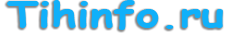
<style>
.page{position:relative;width:230px;height:39px;background:#ffffff}
.page>*{position:absolute;margin:0}
.t1{font:34px "ComicSansMS-Bold";color:#10b0fa;scale:1.32 1}
</style>
<div class="page">
<p class="t1" style="left:7px;top:0px;width:216px;height:30px">Tihinfo.ru</p>
</div>
